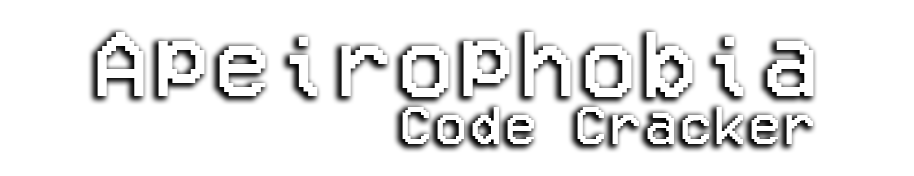
<style>
.page{position:relative;width:914px;height:176px;background:#ffffff}
.page>*{position:absolute;margin:0}
.t1{font:94.4px "VCROSDMono";letter-spacing:0.06em;color:#ffffff}
.t2{font:54.2px "VCROSDMono";letter-spacing:0.06em;color:#ffffff}
</style>
<div class="page">
<p class="t1" style="left:97px;top:32px;width:717px;height:65px">Apeirophobia</p>
<p class="t2" style="left:402px;top:107px;width:411px;height:37px">Code Cracker</p>
</div>
